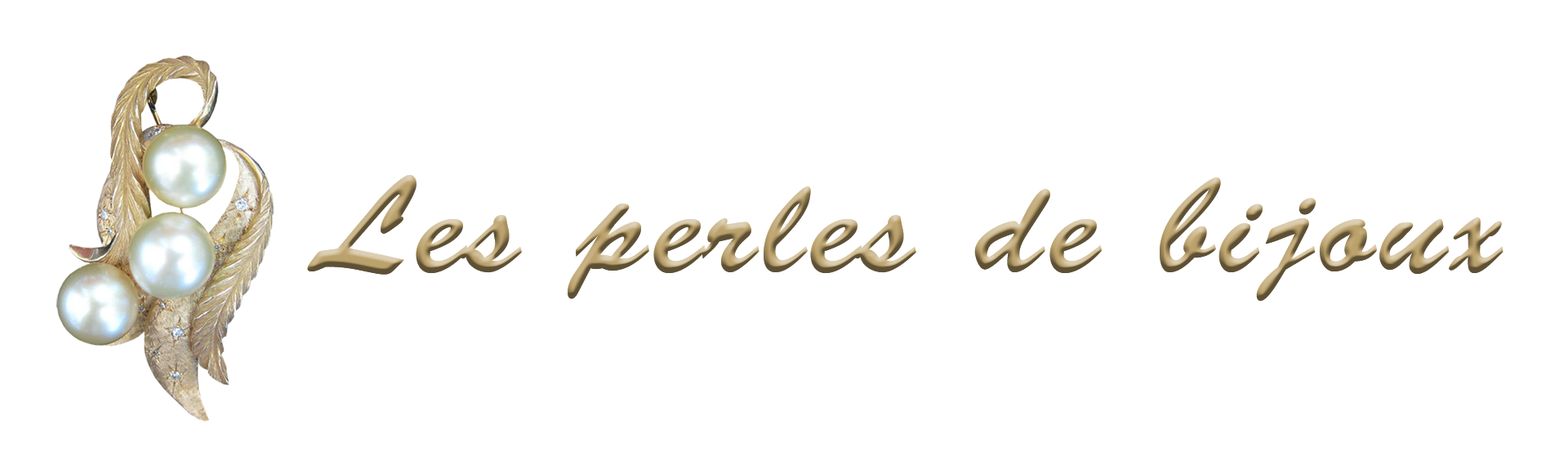
<style>
.page{position:relative;width:1568px;height:466px;background:#ffffff}
.page>*{position:absolute;margin:0}
.t1{font:136.1px "BrushScriptStd";letter-spacing:0.05em}
</style>
<div class="page">
<p class="t1" style="left:307px;top:175px;width:1196px;height:126px">Les perles de bijoux</p>
</div>
